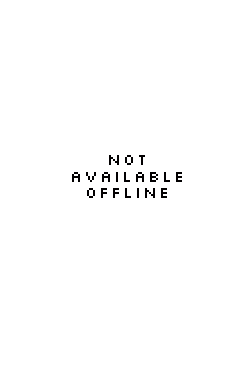
<style>
.page{position:relative;width:250px;height:375px;background:#ffffff}
.page>*{position:absolute;margin:0}
.t1{font:16.7px/16.7px "Silkscreen-Expanded";color:#020001}
</style>
<div class="page">
<p class="t1" style="left:72px;top:155px;width:110px;height:43px;text-align:center">not<br>available<br>offline</p>
</div>
